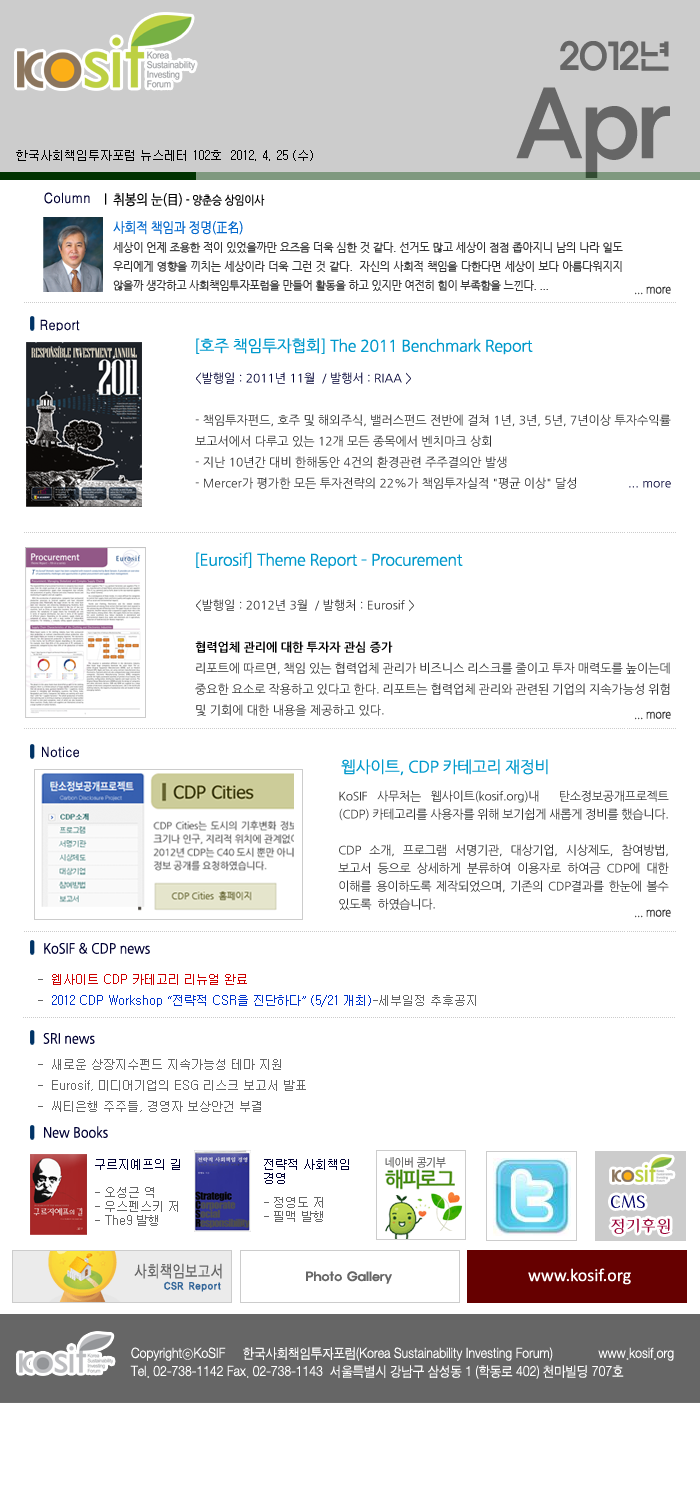
<style>
.page{position:relative;width:700px;height:1500px;background:#ffffff}
.page>*{position:absolute;margin:0}
.t1{font:36.1px/41.9px "ExpoM-HM";color:#666666;scale:0.89 1}
.t2{font:90.2px/41.9px "ExpoM-HM";color:#666666;scale:0.89 1}
.t3{font:12px "Gulim";color:#000000}
.t4{font:14px "H2gtrM";color:#000033;scale:0.9 1}
.t5{font:14px "NanumGothic";letter-spacing:-0.025em;color:#000000;scale:0.9 1}
.t6{font:12px "NanumGothic";letter-spacing:-0.025em;color:#000000;scale:0.9 1}
.t7{font:14px "NanumGothic";letter-spacing:-0.025em;color:#0066cc;scale:0.9 1}
.t8{font:11px "NanumGothic";letter-spacing:-0.025em;color:#333333}
.t9{font:12px "NanumGothic";letter-spacing:-0.025em;color:#333333;scale:0.9 1}
.t10{font:16px "NanumGothic";letter-spacing:-0.025em;color:#0099cc}
.t11{font:12px "NanumGothic";color:#333333}
.t12{font:12px "NanumGothic";color:#000033}
.t13{font:12px "NanumGothicBold";color:#000000}
.t14{font:12px/18px "NanumGothic";letter-spacing:-0.025em;color:#333333}
.t15{font:14px "NanumGothic";color:#000033;scale:0.9 1}
.t16{font:12px "Gulim";color:#0033cc}
.t17{font:12px "Gulim";color:#666666}
.t18{font:12px "Gulim";color:#cc0000}
.t19{font:12px/14px "Gulim";color:#666666}
.t20{font:12px/14px "Gulim";color:#000033}
</style>
<div class="page">
<p class="t1" style="left:516px;top:40px;width:154px;height:138px;text-align:right">2012년<br><span class="t2">Apr</span></p>
<p class="t3" style="left:16px;top:150px;width:297px;height:11px">한국사회책임투자포럼 뉴스레터 102호  2012. 4. 25 (수)</p>
<p class="t4" style="left:44px;top:192px;width:46px;height:12px">Column</p>
<p class="t5" style="left:105px;top:193px;width:160px;height:14px">l  취봉의 눈(目) <span class="t6">- 양춘승 상임이사</span></p>
<p class="t7" style="left:113px;top:221px;width:130px;height:14px">사회적 책임과 정명(正名)</p>
<p class="t8" style="left:113px;top:242px;width:510px;height:49px;text-align:justify">세상이 언제 조용한 적이 있었을까만 요즈음 더욱 심한 것 같다. 선거도 많고 세상이 점점 좁아지니 남의 나라 일도 우리에게 영향을 끼치는 세상이라 더욱 그런 것 같다.  자신의 사회적 책임을 다한다면 세상이 보다 아름다워지지 않을까 생각하고 사회책임투자포럼을 만들어 활동을 하고 있지만 여전히 힘이 부족함을 느낀다. ...</p>
<p class="t9" style="left:635px;top:286px;width:36px;height:9px">... more</p>
<p class="t4" style="left:40px;top:319px;width:40px;height:13px">Report</p>
<p class="t10" style="left:196px;top:338px;width:337px;height:17px">[호주 책임투자협회] The 2011 Benchmark Report</p>
<p class="t11" style="left:195px;top:372px;width:476px;height:117px;text-align:justify"><span class="t12">&lt;발행일 : 2011년 11월  / 발행서 : RIAA &gt;<br><br></span>- 책임투자펀드, 호주 및 해외주식, 밸러스펀드 전반에 걸쳐 1년, 3년, 5년, 7년이상 투자수익률 보고서에서 다루고 있는 12개 모든 종목에서 벤치마크 상회<br>- 지난 10년간 대비 한해동안 4건의 환경관련 주주결의안 발생<br>- Mercer가 평가한 모든 투자전략의 22%가 책임투자실적 "평균 이상" 달성 <span class="t12">              ... more</span></p>
<p class="t10" style="left:196px;top:552px;width:267px;height:17px">[Eurosif] Theme Report – Procurement</p>
<p class="t11" style="left:195px;top:599px;width:475px;height:117px;text-align:justify">&lt;발행일 : 2012년 3월  / 발행처 : Eurosif &gt;<br><br><span class="t13">협력업체 관리에 대한 투자자 관심 증가<br></span>리포트에 따르면, 책임 있는 협력업체 관리가 비즈니스 리스크를 줄이고 투자 매력도를 높이는데 중요한 요소로 작용하고 있다고 한다. 리포트는 협력업체 관리와 관련된 기업의 지속가능성 위험 및 기회에 대한 내용을 제공하고 있다.</p>
<p class="t9" style="left:635px;top:711px;width:36px;height:9px">... more</p>
<p class="t4" style="left:42px;top:746px;width:37px;height:12px">Notice</p>
<p class="t10" style="left:341px;top:759px;width:207px;height:17px">웹사이트, CDP 카테고리 재정비</p>
<p class="t14" style="left:338px;top:790px;width:331px;height:120px;text-align:justify">KoSIF 사무처는 웹사이트(kosif.org)내  탄소정보공개프로젝트(CDP) 카테고리를 사용자를 위해 보기쉽게 새롭게 정비를 했습니다.<br> <br>CDP 소개, 프로그램 서명기관, 대상기업, 시상제도, 참여방법, 보고서 등으로 상세하게 분류하여 이용자로 하여금 CDP에 대한 이해를 용이하도록 제작되었으며, 기존의 CDP결과를 한눈에 볼수 있도록  하였습니다.</p>
<p class="t9" style="left:635px;top:909px;width:36px;height:9px">... more</p>
<p class="t15" style="left:44px;top:942px;width:106px;height:12px">KoSIF &amp; CDP news</p>
<p class="t16" style="left:38px;top:974px;width:438px;height:33px"><span class="t17">-  </span><span class="t18">웹사이트 CDP 카테고리 리뉴얼 완료     <br></span><span class="t17">-  </span>2012 CDP Workshop “전략적 CSR을 진단하다” (5/21 개최)<span class="t17">-세부일정 추후공지</span></p>
<p class="t15" style="left:43px;top:1033px;width:52px;height:11px">SRI news</p>
<p class="t17" style="left:38px;top:1059px;width:268px;height:53px">-  새로운 상장지수펀드 지속가능성 테마 지원  <br>-  Eurosif, 미디어기업의 ESG 리스크 보고서 발표<br>-  씨티은행 주주들, 경영자 보상안건 부결</p>
<p class="t15" style="left:44px;top:1126px;width:64px;height:12px">New Books</p>
<p class="t19" style="left:95px;top:1159px;width:85px;height:67px"><span class="t20">구르지예프의 길<br><br></span>- 오성근 역<br>- 우스펜스키 저<br>- The9 발행</p>
<p class="t19" style="left:264px;top:1159px;width:85px;height:63px"><span class="t20">전략적 사회책임 경영<br></span><br>- 정영도 저<br>- 필맥 발행</p>
</div>
